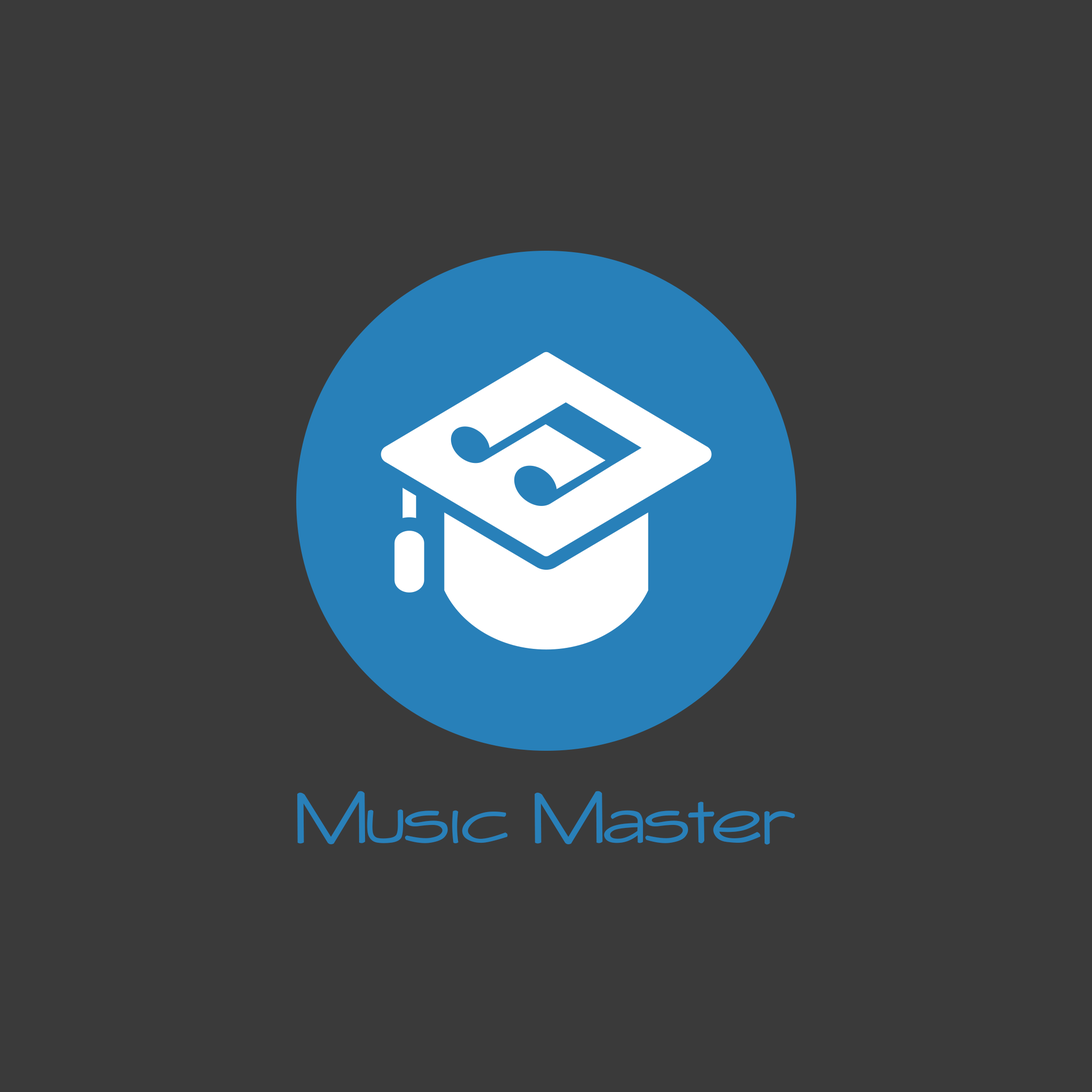
<style>
.page{position:relative;width:1092px;height:1092px;background:#3a3a3a}
.page>*{position:absolute;margin:0}
.t1{font:87.5px "Whitehall";color:#2980b9}
</style>
<div class="page">
<p class="t1" style="left:297px;top:791px;width:498px;height:54px">Music Master</p>
</div>
